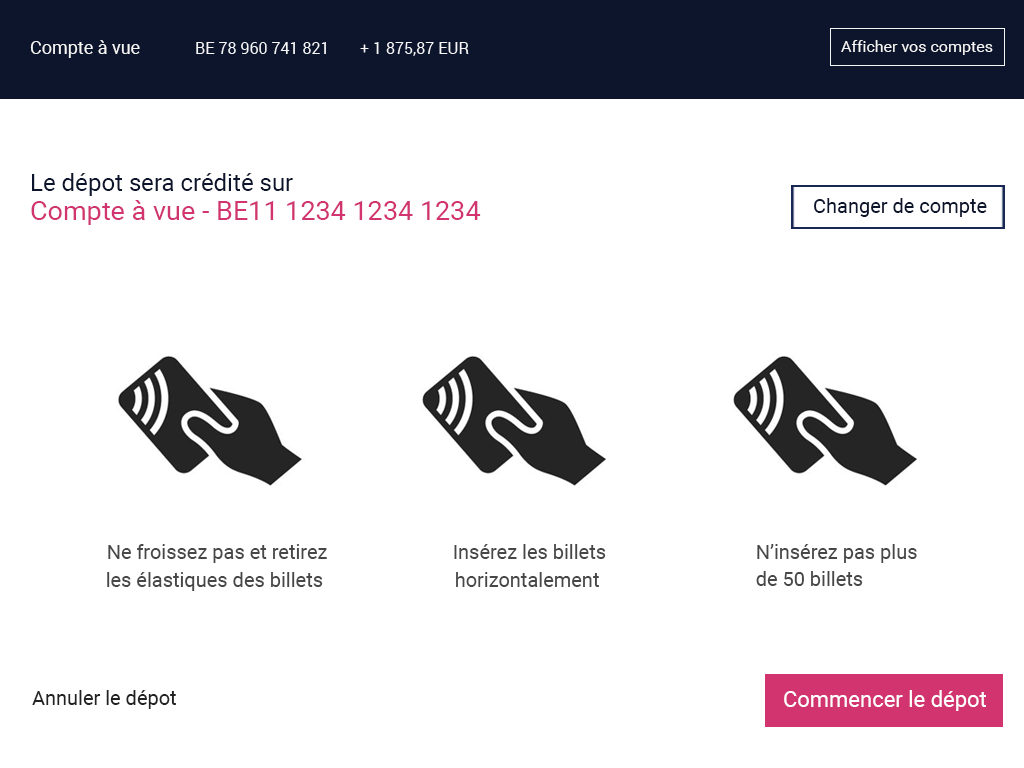
<style>
.page{position:relative;width:1024px;height:768px;background:#ffffff}
.page>*{position:absolute;margin:0}
.t1{font:18px "Roboto-Regular";color:#f5f5f5}
.t2{font:16px "Roboto-Regular";color:#f5f5f5}
.t3{font:24px "Roboto-Regular";color:#0d152d}
.t4{font:20px "Roboto-Regular";color:#0d152d}
.t5{font:27px "Roboto-Regular";color:#d1346e}
.t6{font:20px "Roboto-Regular";color:#474747}
.t7{font:20px "Roboto-Regular";color:#222222}
.t8{font:22px "Roboto-Regular";color:#ffffff}
</style>
<div class="page">
<p class="t1" style="left:30px;top:40px;width:110px;height:18px">Compte à vue</p>
<p class="t2" style="left:841px;top:40px;width:152px;height:15px">Afficher vos comptes</p>
<p class="t2" style="left:196px;top:42px;width:130px;height:12px">BE 78 960 741 821</p>
<p class="t2" style="left:360px;top:42px;width:109px;height:14px">+ 1 875,87 EUR</p>
<p class="t3" style="left:32px;top:173px;width:261px;height:23px">Le dépot sera crédité sur</p>
<p class="t4" style="left:814px;top:198px;width:173px;height:19px">Changer de compte</p>
<p class="t5" style="left:31px;top:200px;width:450px;height:25px">Compte à vue - BE11 1234 1234 1234</p>
<p class="t6" style="left:108px;top:544px;width:219px;height:19px">Ne froissez pas et retirez</p>
<p class="t6" style="left:454px;top:544px;width:152px;height:15px">Insérez les billets</p>
<p class="t6" style="left:757px;top:544px;width:160px;height:19px">N’insérez pas plus</p>
<p class="t6" style="left:107px;top:572px;width:216px;height:19px">les élastiques des billets</p>
<p class="t6" style="left:456px;top:572px;width:143px;height:15px">horizontalement</p>
<p class="t6" style="left:756px;top:571px;width:107px;height:15px">de 50 billets</p>
<p class="t7" style="left:32px;top:690px;width:144px;height:19px">Annuler le dépot</p>
<p class="t8" style="left:784px;top:690px;width:202px;height:21px">Commencer le dépot</p>
</div>
